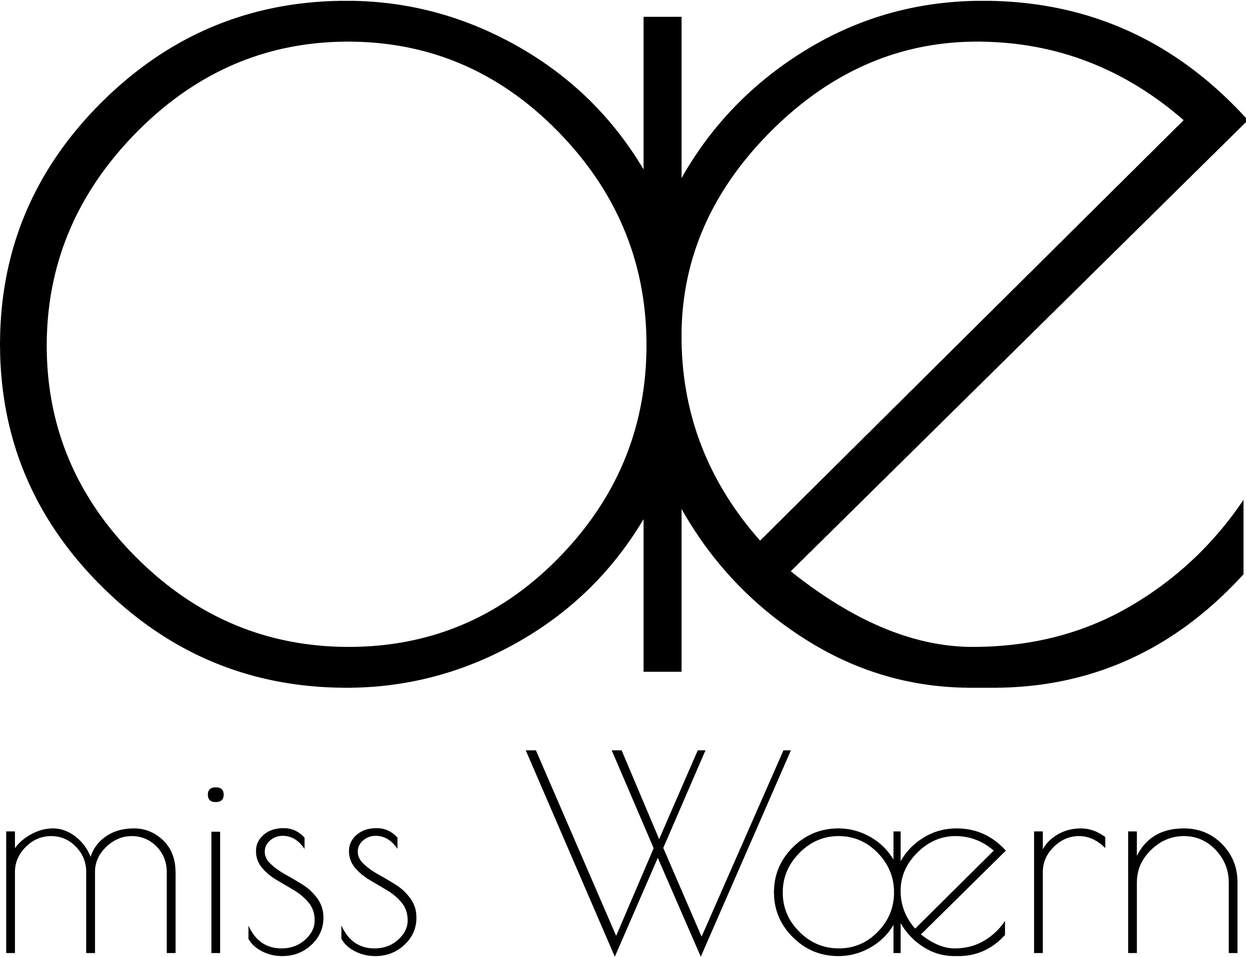
<style>
.page{position:relative;width:1246px;height:957px;background:#ffffff}
.page>*{position:absolute;margin:0}
.t1{font:270.3px "PoiretOne-Regular";color:#000000}
.t2{font:270.3px "PoiretOne-Regular";letter-spacing:-0.125em;color:#000000}
.t3{font:270.3px "PoiretOne-Regular";letter-spacing:0.01em;color:#000000}
</style>
<div class="page">
<p class="t1" style="left:6px;top:750px;width:1231px;height:207px">miss <span class="t2">W</span><span class="t3">æ</span>rn</p>
</div>
